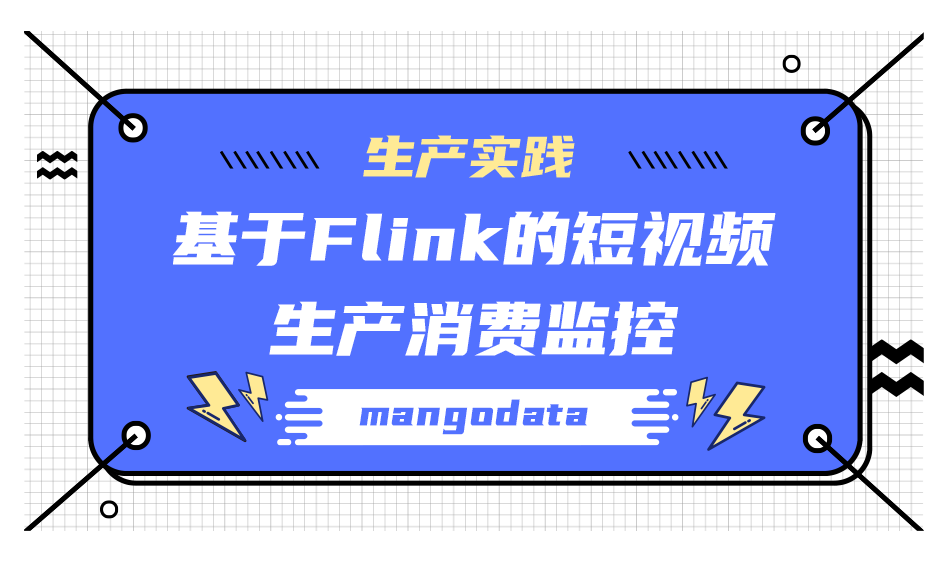
<style>
.page{position:relative;width:952px;height:562px;background:#ffffff}
.page>*{position:absolute;margin:0}
.t1{font:58.3px "YouSheBiaoTiHei";letter-spacing:-0.01em;color:#ffea95}
.t2{font:75px "YouSheBiaoTiHei";letter-spacing:-0.01em;color:#ffffff}
.t3{font:41.7px "YouSheBiaoTiHei";letter-spacing:-0.01em;color:#5271ff}
</style>
<div class="page">
<p class="t1" style="left:363px;top:135px;width:212px;height:43px">生产实践</p>
<p class="t2" style="left:172px;top:211px;width:604px;height:145px;text-align:center">基于Flink的短视频<br>生产消费监控</p>
<p class="t3" style="left:359px;top:399px;width:229px;height:36px">mangodata</p>
</div>
